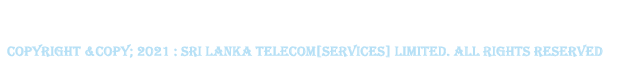
<style>
.page{position:relative;width:640px;height:60px;background:#ffffff}
.page>*{position:absolute;margin:0}
.t1{font:14px "Algerian";color:#b6e0f6}
</style>
<div class="page">
<p class="t1" style="left:7px;top:44px;width:596px;height:14px">Copyright &amp;copy; 2021 : Sri Lanka Telecom[Services] Limited. All Rights Reserved</p>
</div>
